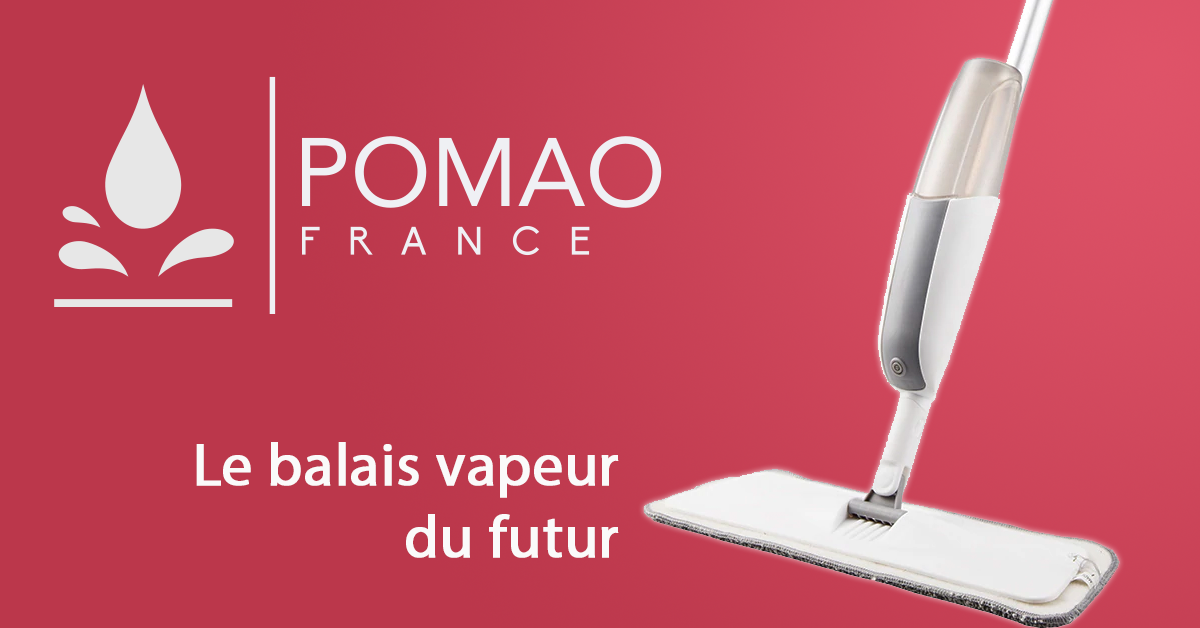
<style>
.page{position:relative;width:1200px;height:628px;background:#bb374b}
.page>*{position:absolute;margin:0}
.t1{font:60px/72px "MyriadPro-Regular";color:#fafafa;font-weight:bold}
</style>
<div class="page">
<p class="t1" style="left:196px;top:442px;width:423px;height:116px;text-align:right">Le balais vapeur<br>du futur</p>
</div>
